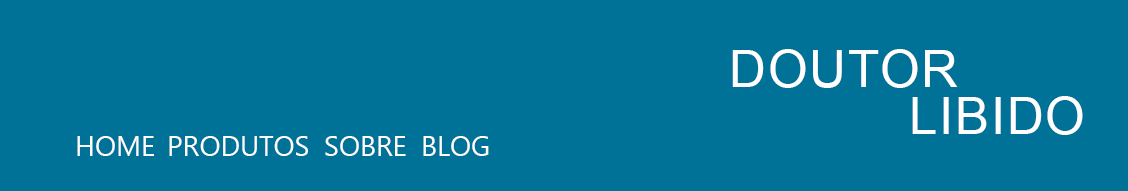
<style>
.page{position:relative;width:1128px;height:191px;background:#007298}
.page>*{position:absolute;margin:0}
.t1{font:51px "ArialMT";color:#ffffff;text-transform:uppercase}
.t2{font:27.9px "MicrosoftNewTaiLue";color:#ffffff;text-transform:uppercase}
</style>
<div class="page">
<p class="t1" style="left:732px;top:49px;width:226px;height:39px">doutor</p>
<p class="t1" style="left:912px;top:96px;width:171px;height:39px">libido</p>
<p class="t2" style="left:77px;top:136px;width:77px;height:20px">Home</p>
<p class="t2" style="left:169px;top:136px;width:139px;height:20px">Produtos</p>
<p class="t2" style="left:325px;top:136px;width:81px;height:20px">Sobre</p>
<p class="t2" style="left:423px;top:136px;width:66px;height:20px">Blog</p>
</div>
